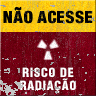
<style>
.page{position:relative;width:96px;height:96px}
.page>*{position:absolute;margin:0}
.t1{font:12.2px/13px "HelveticaLT-Condensed-Black";letter-spacing:0.06em;color:#ffffff}
</style>
<div class="page">
<p class="t1" style="left:20px;top:67px;width:56px;height:26px;text-align:center">RISCO DE<br>RADIAÇÃO</p>
</div>
